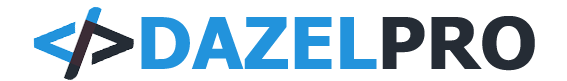
<style>
.page{position:relative;width:567px;height:81px;background:#ffffff}
.page>*{position:absolute;margin:0}
.t1{font:71.4px "Tahoma-Bold";color:#2293dc;scale:1.04 1}
.t2{font:71.4px "Tahoma-Bold";color:#252c35;scale:1.04 1}
</style>
<div class="page">
<p class="t1" style="left:141px;top:16px;width:394px;height:55px">DAZEL<span class="t2">PRO</span></p>
</div>
